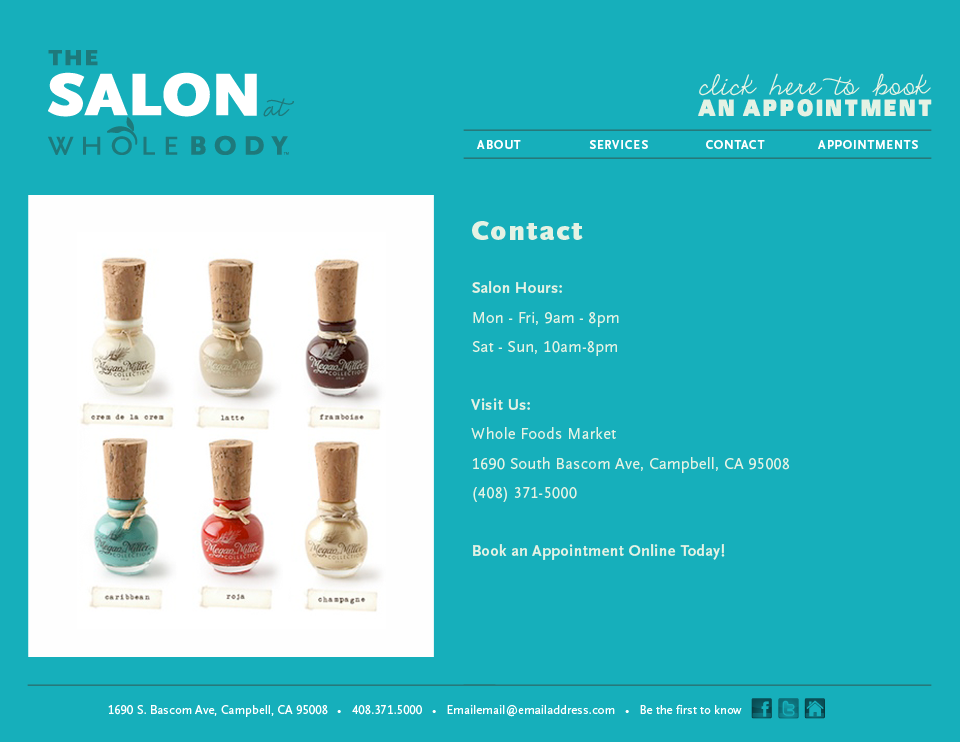
<style>
.page{position:relative;width:960px;height:742px;background:#16afbb}
.page>*{position:absolute;margin:0}
.t1{font:40.5px "EmilyLimePro";color:#e4f2e4}
.t2{font:23.1px "SansBlack";letter-spacing:0.1em;color:#e4f2e4}
.t3{font:12.5px "WFM-ScalaSans-Bold";letter-spacing:0.075em;color:#fefefe}
.t4{font:28px "ScalaSansOT-Black";letter-spacing:0.075em;color:#e4f2e4}
.t5{font:16px "WFM-ScalaSans-Regular";letter-spacing:0.025em;color:#e4f2e4}
.t6{font:16px "WFM-ScalaSans-Bold";letter-spacing:0.025em;color:#e4f2e4}
.t7{font:12.5px "WFM-ScalaSans-Regular";letter-spacing:0.01em;color:#ffffff}
</style>
<div class="page">
<p class="t1" style="left:699px;top:73px;width:232px;height:23px">click here to book</p>
<p class="t2" style="left:698px;top:99px;width:234px;height:18px">AN APPOINTMENT</p>
<p class="t3" style="left:477px;top:140px;width:44px;height:9px">ABOUT</p>
<p class="t3" style="left:589px;top:140px;width:59px;height:9px">SERVICES</p>
<p class="t3" style="left:706px;top:140px;width:59px;height:9px">CONTACT</p>
<p class="t3" style="left:818px;top:140px;width:100px;height:9px">APPOINTMENTS</p>
<p class="t4" style="left:472px;top:221px;width:111px;height:19px">Contact</p>
<p class="t5" style="left:471px;top:281px;width:319px;height:279px"><span class="t6"><br>Salon Hours:<br></span>Mon - Fri, 9am - 8pm<br>Sat - Sun, 10am-8pm<br><br><span class="t6">Visit Us:<br></span>Whole Foods Market<br>1690 South Bascom Ave, Campbell, CA 95008<br>(408) 371-5000<br><br><span class="t6">Book an Appointment Online Today!</span></p>
<p class="t7" style="left:108px;top:704px;width:634px;height:13px">1690 S. Bascom Ave, Campbell, CA 95008   •   408.371.5000   •   Emailemail@emailaddress.com   •   Be the first to know</p>
</div>
